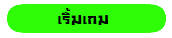
<style>
.page{position:relative;width:172px;height:38px;background:#2ffd08}
.page>*{position:absolute;margin:0}
.t1{font:19.2px "-LayijiTaMaiTine1";color:#030303}
</style>
<div class="page">
<p class="t1" style="left:58px;top:8px;width:50px;height:17px">เริ้มเกม</p>
</div>
